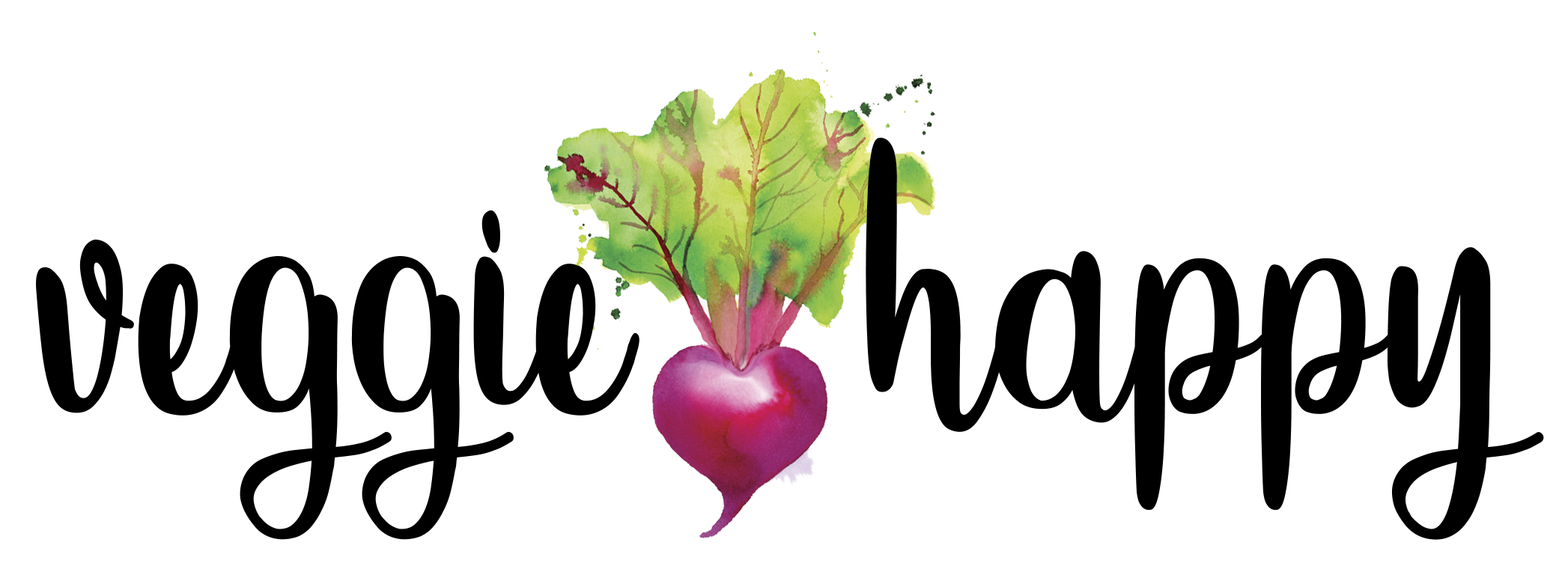
<style>
.page{position:relative;width:1568px;height:587px;background:#ffffff}
.page>*{position:absolute;margin:0}
.t1{font:454.8px "Sweet-Hipster";color:#000000}
</style>
<div class="page">
<p class="t1" style="left:36px;top:137px;width:1508px;height:403px">veggie  happy</p>
</div>
